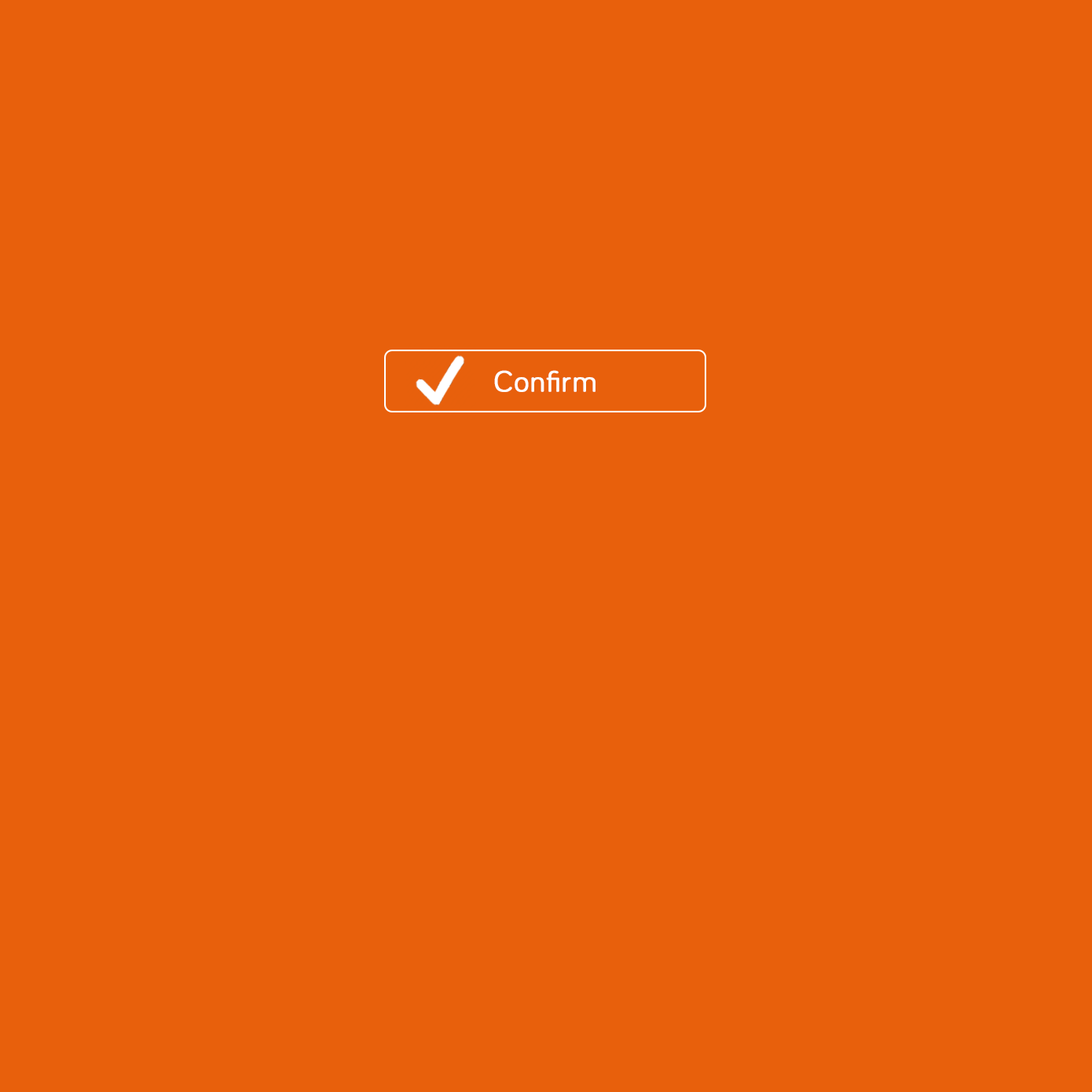
<style>
.page{position:relative;width:1092px;height:1092px;background:#e8600c}
.page>*{position:absolute;margin:0}
.t1{font:30.1px "Bariol-Regular";letter-spacing:0.01em;color:#fefefe;font-weight:bold}
</style>
<div class="page">
<p class="t1" style="left:494px;top:370px;width:101px;height:22px">Confirm</p>
</div>
